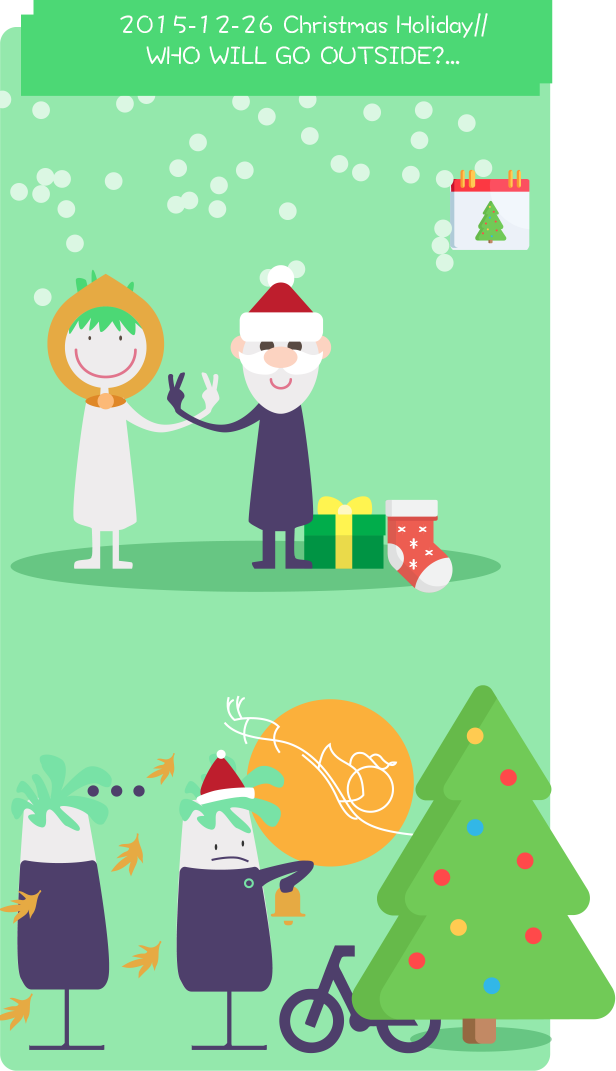
<style>
.page{position:relative;width:616px;height:1071px;background:#94e8ac}
.page>*{position:absolute;margin:0}
.t1{font:26.2px "DFWaWaSC-W5";color:#ffffff;scale:0.96 1}
</style>
<div class="page">
<p class="t1" style="left:120px;top:13px;width:368px;height:52px;text-align:center">2015-12-26 Christmas Holiday//<br>WHO WILL GO OUTSIDE?...</p>
</div>
